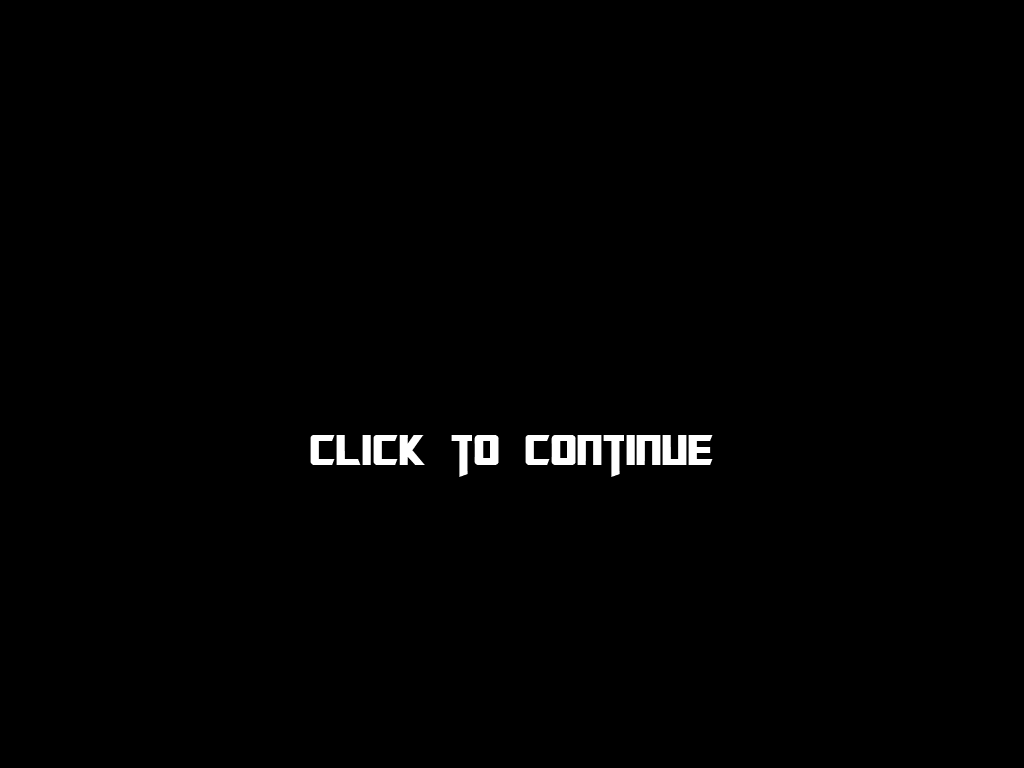
<style>
.page{position:relative;width:1024px;height:768px;background:#000000}
.page>*{position:absolute;margin:0}
.t1{font:48px "TransformersMovie";letter-spacing:0.02em;color:#ffffff}
</style>
<div class="page">
<p class="t1" style="left:310px;top:435px;width:403px;height:42px">click to continue</p>
</div>
